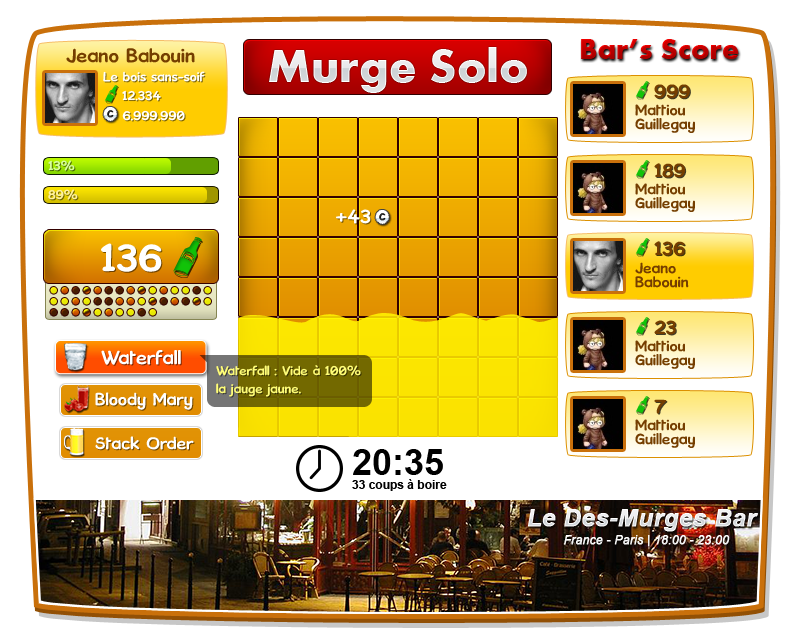
<style>
.page{position:relative;width:796px;height:639px;background:#ffffff}
.page>*{position:absolute;margin:0}
.t1{font:30px "Aharoni-Bold"}
.t2{font:18px "Kronika";color:#753e00}
.t3{font:48px "Aharoni-Bold"}
.t4{font:12px "Kronika";color:#ffffff}
.t5{font:9px "Kronika";color:#272727;font-weight:bold}
.t6{font:14px/14px "Kronika";color:#753e00}
.t7{font:12px "Kronika";color:#d7fe9f}
.t8{font:12px "Kronika";color:#fef19f}
.t9{font:18px "Kronika";color:#ffffff}
.t10{font:36px "Kronika";color:#ffffff}
.t11{font:12px/18px "Kronika";color:#fffd78}
.t12{font:16px "Kronika";color:#ffffff}
.t13{font:12px/14px "Arial-BoldMT";color:#000000}
.t14{font:36px/14px "Arial-BoldMT";color:#000000}
.t15{font:24px "Arial-BoldItalicMT";color:#ffffff;font-weight:bold}
.t16{font:12px "Arial-ItalicMT";color:#ffffff;font-weight:bold}
</style>
<div class="page">
<p class="t1" style="left:581px;top:39px;width:158px;height:20px">Bar’s Score</p>
<p class="t2" style="left:66px;top:48px;width:129px;height:15px">Jeano Babouin</p>
<p class="t3" style="left:269px;top:47px;width:258px;height:46px">Murge Solo</p>
<p class="t4" style="left:103px;top:71px;width:102px;height:11px">Le bois sans-soif</p>
<p class="t2" style="left:654px;top:84px;width:36px;height:15px">999</p>
<p class="t4" style="left:122px;top:90px;width:39px;height:11px">12.334</p>
<p class="t5" style="left:107px;top:110px;width:7px;height:8px">C</p>
<p class="t4" style="left:122px;top:110px;width:63px;height:11px">6.999.990</p>
<p class="t6" style="left:635px;top:104px;width:60px;height:29px">Mattiou<br>Guillegay</p>
<p class="t7" style="left:48px;top:160px;width:27px;height:11px">13%</p>
<p class="t2" style="left:654px;top:163px;width:32px;height:15px">189</p>
<p class="t6" style="left:635px;top:183px;width:60px;height:29px">Mattiou<br>Guillegay</p>
<p class="t8" style="left:48px;top:189px;width:30px;height:11px">89%</p>
<p class="t9" style="left:336px;top:209px;width:35px;height:15px">+43</p>
<p class="t5" style="left:379px;top:213px;width:7px;height:8px">C</p>
<p class="t10" style="left:101px;top:243px;width:61px;height:29px">136</p>
<p class="t2" style="left:654px;top:241px;width:31px;height:15px">136</p>
<p class="t6" style="left:635px;top:262px;width:54px;height:26px">Jeano<br>Babouin</p>
<p class="t2" style="left:654px;top:320px;width:22px;height:15px">23</p>
<p class="t6" style="left:635px;top:340px;width:60px;height:29px">Mattiou<br>Guillegay</p>
<p class="t9" style="left:101px;top:350px;width:80px;height:15px">Waterfall</p>
<p class="t11" style="left:216px;top:365px;width:145px;height:32px">Waterfall : Vide à 100%<br>la jauge jaune.</p>
<p class="t12" style="left:95px;top:392px;width:98px;height:18px">Bloody Mary</p>
<p class="t2" style="left:654px;top:399px;width:13px;height:15px">7</p>
<p class="t6" style="left:635px;top:419px;width:60px;height:29px">Mattiou<br>Guillegay</p>
<p class="t12" style="left:95px;top:436px;width:99px;height:14px">Stack Order</p>
<p class="t13" style="left:352px;top:449px;width:95px;height:42px"><span class="t14">20:35<br></span>33 coups à boire</p>
<p class="t15" style="left:528px;top:509px;width:230px;height:23px">Le Des-Murges Bar</p>
<p class="t16" style="left:564px;top:535px;width:166px;height:12px">France - Paris | 18:00 - 23:00</p>
</div>
